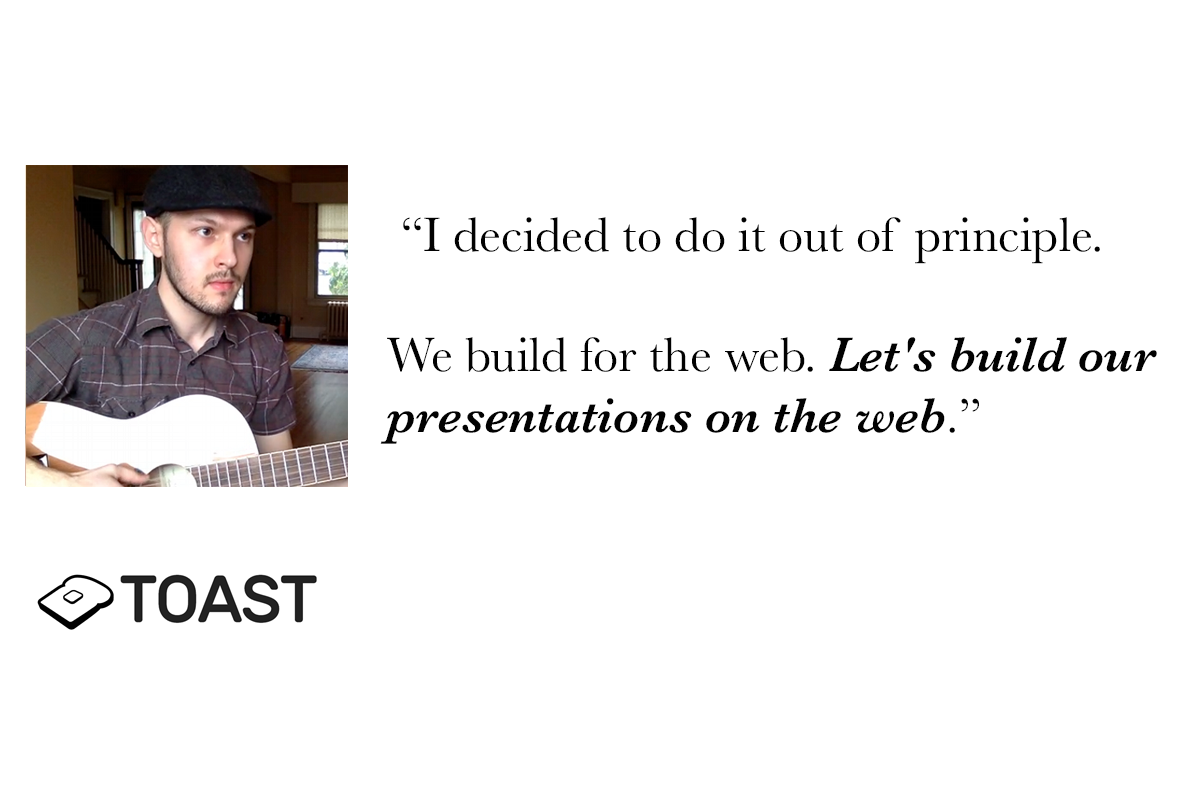
<style>
.page{position:relative;width:1200px;height:800px;background:#ffffff}
.page>*{position:absolute;margin:0}
.t1{font:50.2px "Baskerville";color:#020202}
.t2{font:50.2px "Baskerville-SemiBoldItalic";color:#020202}
</style>
<div class="page">
<p class="t1" style="left:380px;top:217px;width:777px;height:227px">“I decided to do it out of principle.<br><br>We build for the web. <span class="t2">Let's build our <br>presentations on the web</span>.”</p>
</div>
